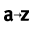
<style>
.page{position:relative;width:32px;height:32px;background:#ffffff}
.page>*{position:absolute;margin:0}
.t1{font:20.8px "Meta-Bold";letter-spacing:-0.06em;color:#000000}
</style>
<div class="page">
<p class="t1" style="left:4px;top:10px;width:10px;height:12px">a</p>
<p class="t1" style="left:20px;top:10px;width:10px;height:11px">z</p>
</div>
